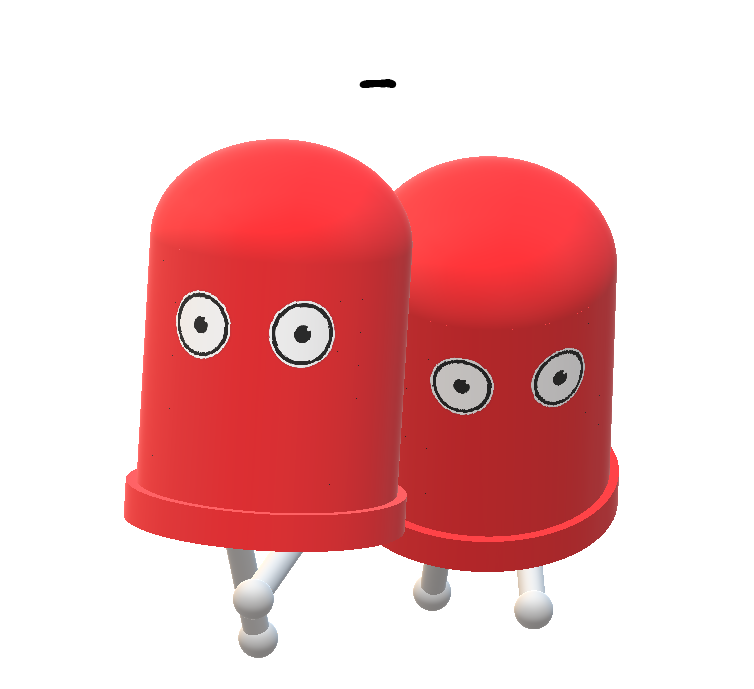
<style>
.page{position:relative;width:754px;height:689px;background:#ffffff}
.page>*{position:absolute;margin:0}
.t1{font:80px "SegoePrint-Bold";color:#000000}
</style>
<div class="page">
<p class="t1" style="left:359px;top:79px;width:38px;height:9px">-</p>
</div>
